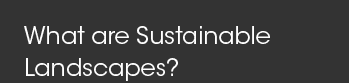
<style>
.page{position:relative;width:349px;height:83px;background:#333333}
.page>*{position:absolute;margin:0}
.t1{font:23.8px/32.4px "ITCAvantGardeStd-Bk";color:#ffffff}
</style>
<div class="page">
<p class="t1" style="left:24px;top:26px;width:246px;height:55px">What are Sustainable<br>Landscapes?</p>
</div>
